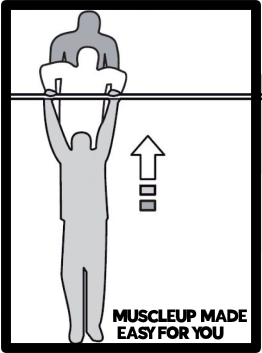
<style>
.page{position:relative;width:262px;height:353px;background:#ffffff}
.page>*{position:absolute;margin:0}
.t1{font:14.7px "IndigoRegular-Regular";color:#000000}
</style>
<div class="page">
<p class="t1" style="left:113px;top:309px;width:134px;height:31px">MUSCLEUP MADE<br> EASY FOR YOU</p>
</div>
